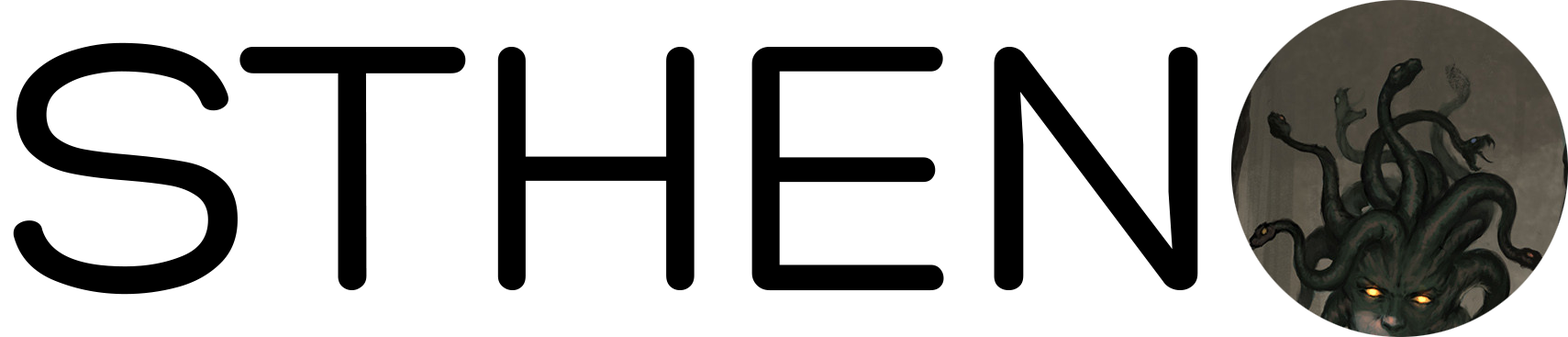
<style>
.page{position:relative;width:1568px;height:337px;background:#ffffff}
.page>*{position:absolute;margin:0}
.t1{font:382.3px "Hero-Regular";color:#000000}
</style>
<div class="page">
<p class="t1" style="left:13px;top:42px;width:1185px;height:253px">STHEN</p>
</div>
